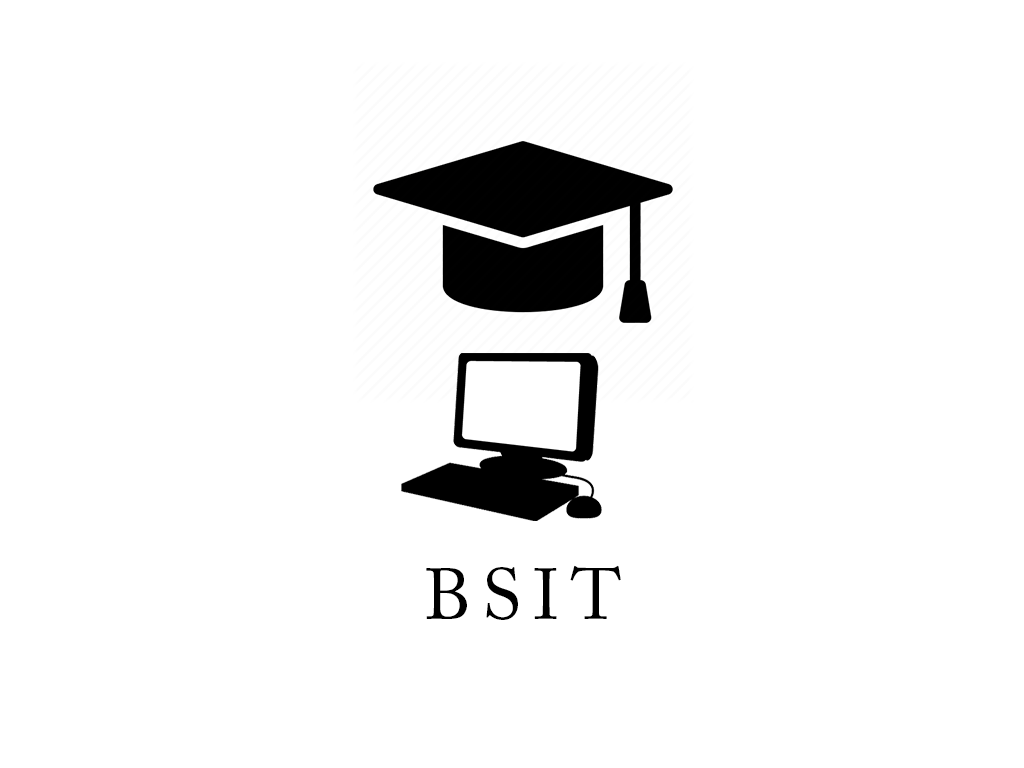
<style>
.page{position:relative;width:1024px;height:768px;background:#ffffff}
.page>*{position:absolute;margin:0}
.t1{font:72px "ACaslonPro-Regular";letter-spacing:0.15em;color:#000000}
</style>
<div class="page">
<p class="t1" style="left:426px;top:565px;width:195px;height:55px">BSIT</p>
</div>
